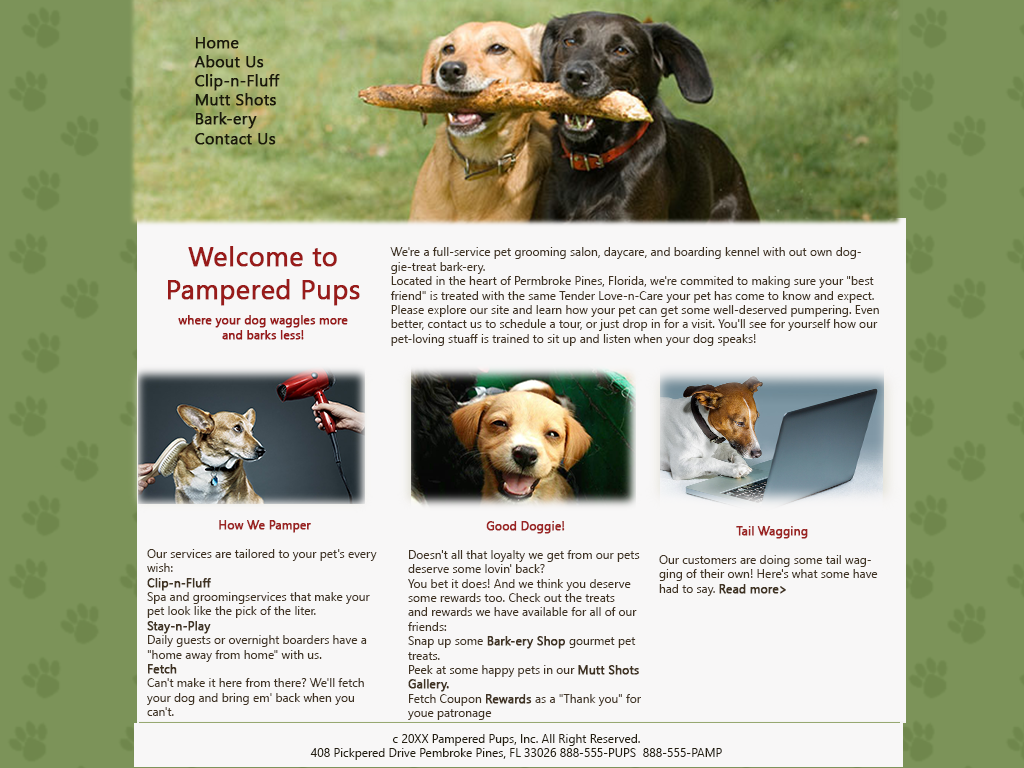
<style>
.page{position:relative;width:1024px;height:768px;background:#f8f7f7}
.page>*{position:absolute;margin:0}
.t1{font:16px "SegoeUI";color:#1a180b;font-weight:bold}
.t2{font:12px "SegoeUI";color:#981b1a;font-weight:bold}
.t3{font:27px "SegoeUI";color:#981b1a;font-weight:bold}
.t4{font:12px "SegoeUI";color:#403323}
.t5{font:12px "SegoeUI";color:#9b2423;font-weight:bold}
.t6{font:12px "SegoeUI";color:#403323;font-weight:bold}
.t7{font:12px "SegoeUI";color:#241e10}
</style>
<div class="page">
<p class="t1" style="left:194px;top:37px;width:86px;height:108px">Home<br>About Us<br>Clip-n-Fluff<br>Mutt Shots<br>Bark-ery<br>Contact Us</p>
<p class="t2" style="left:168px;top:246px;width:192px;height:94px;text-align:center"><span class="t3">Welcome to Pampered Pups<br></span>where your dog waggles more        and barks less!</p>
<p class="t4" style="left:390px;top:247px;width:489px;height:99px">We're a full-service pet grooming salon, daycare, and boarding kennel with out own doggie-treat bark-ery.<br>Located in the heart of Permbroke Pines, Florida, we're commited to making sure your "best friend" is treated with the same Tender Love-n-Care your pet has come to know and expect.<br>Please explore our site and learn how your pet can get some well-deserved pumpering. Even better, contact us to schedule a tour, or just drop in for a visit. You'll see for yourself how our pet-loving stuaff is trained to sit up and listen when your dog speaks!</p>
<p class="t4" style="left:147px;top:520px;width:230px;height:196px;text-align:center"><span class="t5">How We Pamper<br><br></span>Our services are tailored to your pet's every wish:<br><span class="t6">Clip-n-Fluff<br></span>Spa and groomingservices that make your pet look like the pick of the liter.<br><span class="t6">Stay-n-Play<br></span>Daily guests or overnight boarders have a "home away from home" with us.<br><span class="t6">Fetch<br></span>Can't make it here from there? We'll fetch your dog and bring em' back when you can't.</p>
<p class="t4" style="left:408px;top:521px;width:233px;height:199px;text-align:center"><span class="t5">Good Doggie!<br><br></span>Doesn't all that loyalty we get from our pets deserve some lovin' back?<br>You bet it does! And we think you deserve some rewards too. Check out the treats<br>and rewards we have available for all of our friends:<br>Snap up some <span class="t6">Bark-ery Shop </span>gourmet pet treats.<br>Peek at some happy pets in our <span class="t6">Mutt Shots Gallery.<br></span>Fetch Coupon <span class="t6">Rewards </span>as a "Thank you" for youe patronage</p>
<p class="t4" style="left:659px;top:526px;width:219px;height:70px;text-align:center"><span class="t5">Tail Wagging<br><br></span>Our customers are doing some tail wagging of their own! Here's what some have had to say. <span class="t6">Read more&gt;</span></p>
<p class="t7" style="left:310px;top:734px;width:412px;height:26px;text-align:center">c 20XX Pampered Pups, Inc. All Right Reserved.<br>408 Pickpered Drive Pembroke Pines, FL 33026 888-555-PUPS  888-555-PAMP</p>
</div>
